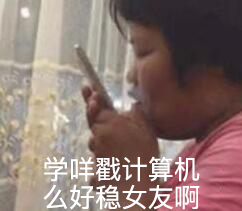
<style>
.page{position:relative;width:242px;height:211px}
.page>*{position:absolute;margin:0}
.t1{font:26.2px/28px "PingFangSC-Regular";color:#ffffff}
</style>
<div class="page">
<p class="t1" style="left:43px;top:156px;width:157px;height:54px;text-align:center">学咩戳计算机<br>么好稳女友啊</p>
</div>
